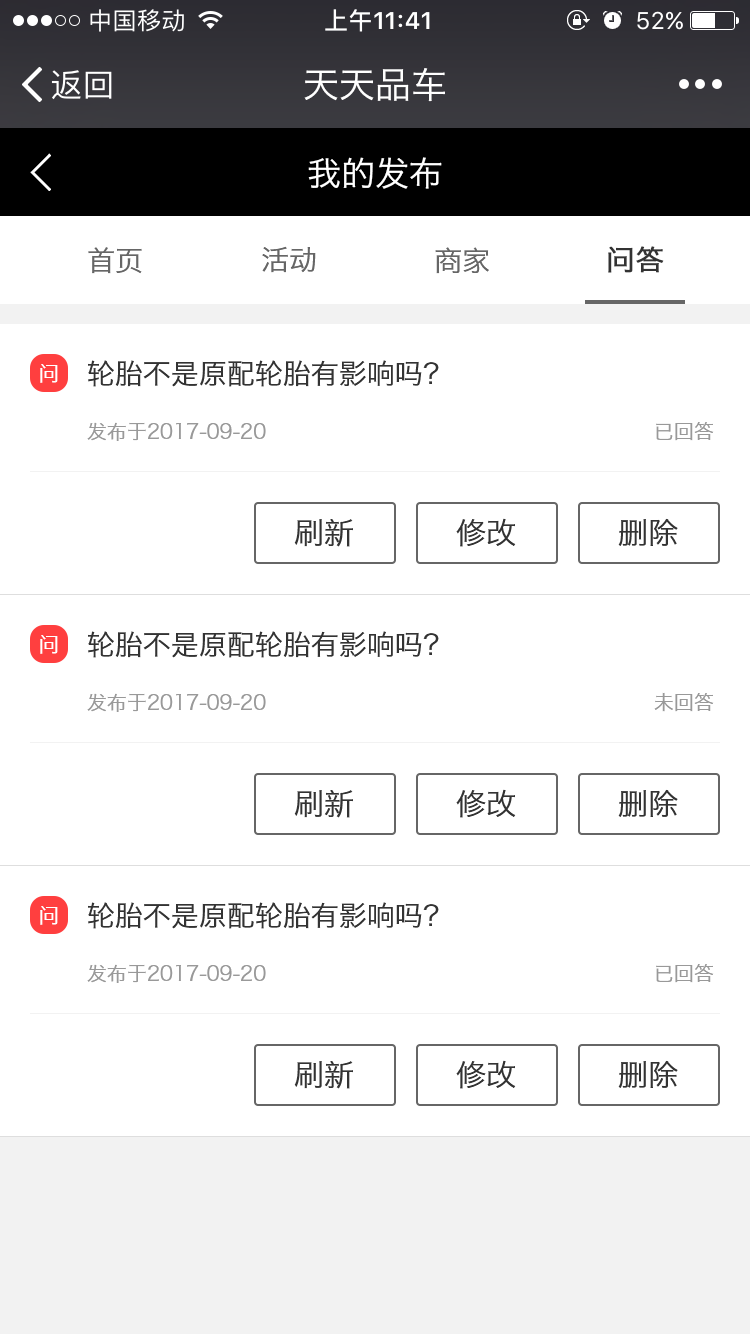
<style>
.page{position:relative;width:750px;height:1334px;background:#ffffff}
.page>*{position:absolute;margin:0}
.t1{font:36px "HiraginoSansGB-W3";color:#ffffff}
.t2{font:34px "HiraginoSansGB-W3";color:#ffffff}
.t3{font:28px "HiraginoSansGB-W3";color:#666666}
.t4{font:28px "HiraginoSansGB-W3";color:#333333;font-weight:bold}
.t5{font:20px "HiraginoSansGB-W3";color:#ffffff;text-transform:uppercase}
.t6{font:28px "HiraginoSansGB-W3";color:#333333;text-transform:uppercase}
.t7{font:20px "HiraginoSansGB-W3";color:#999999;text-transform:uppercase}
.t8{font:30px "HiraginoSansGB-W3";color:#333333}
</style>
<div class="page">
<p class="t1" style="left:304px;top:68px;width:141px;height:34px">天天品车</p>
<p class="t2" style="left:308px;top:157px;width:134px;height:32px">我的发布</p>
<p class="t3" style="left:262px;top:246px;width:54px;height:27px">活动</p>
<p class="t4" style="left:608px;top:246px;width:56px;height:27px">问答</p>
<p class="t3" style="left:88px;top:247px;width:54px;height:27px">首页</p>
<p class="t3" style="left:435px;top:247px;width:54px;height:27px">商家</p>
<p class="t5" style="left:40px;top:364px;width:18px;height:19px">问</p>
<p class="t6" style="left:88px;top:360px;width:351px;height:27px">轮胎不是原配轮胎有影响吗？</p>
<p class="t7" style="left:87px;top:422px;width:179px;height:19px">发布于2017-09-20</p>
<p class="t7" style="left:656px;top:422px;width:58px;height:19px">已回答</p>
<p class="t8" style="left:294px;top:519px;width:59px;height:28px">刷新</p>
<p class="t8" style="left:456px;top:518px;width:60px;height:29px">修改</p>
<p class="t8" style="left:618px;top:518px;width:60px;height:28px">删除</p>
<p class="t5" style="left:40px;top:635px;width:18px;height:19px">问</p>
<p class="t6" style="left:88px;top:631px;width:351px;height:27px">轮胎不是原配轮胎有影响吗？</p>
<p class="t7" style="left:87px;top:693px;width:179px;height:19px">发布于2017-09-20</p>
<p class="t7" style="left:654px;top:692px;width:60px;height:20px">未回答</p>
<p class="t8" style="left:294px;top:790px;width:59px;height:28px">刷新</p>
<p class="t8" style="left:456px;top:789px;width:60px;height:29px">修改</p>
<p class="t8" style="left:618px;top:789px;width:60px;height:28px">删除</p>
<p class="t6" style="left:88px;top:902px;width:351px;height:27px">轮胎不是原配轮胎有影响吗？</p>
<p class="t5" style="left:40px;top:906px;width:18px;height:19px">问</p>
<p class="t7" style="left:87px;top:964px;width:179px;height:19px">发布于2017-09-20</p>
<p class="t7" style="left:656px;top:964px;width:58px;height:19px">已回答</p>
<p class="t8" style="left:294px;top:1061px;width:59px;height:28px">刷新</p>
<p class="t8" style="left:456px;top:1060px;width:60px;height:29px">修改</p>
<p class="t8" style="left:618px;top:1060px;width:60px;height:28px">删除</p>
</div>
